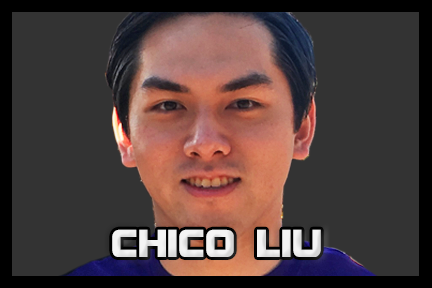
<style>
.page{position:relative;width:432px;height:288px;background:#333333}
.page>*{position:absolute;margin:0}
.t1{font:41.7px "BolsterBold";color:#f3f3f3}
</style>
<div class="page">
<p class="t1" style="left:112px;top:229px;width:209px;height:28px">CHICO LIU</p>
</div>
